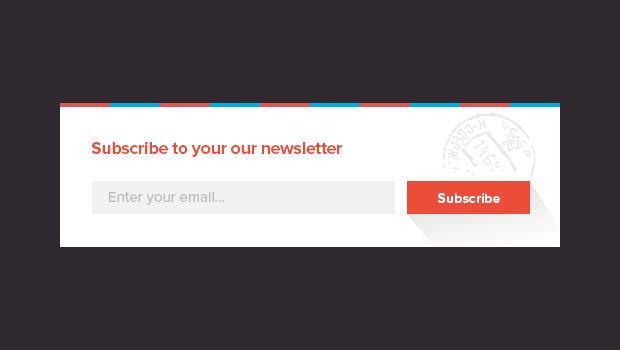
<style>
.page{position:relative;width:620px;height:350px;background:#2f292f}
.page>*{position:absolute;margin:0}
.t1{font:18px "ProximaNova-Bold";letter-spacing:-0.025em;color:#ea4e39}
.t2{font:15px "ProximaNova-Regular";color:#bababa}
.t3{font:14px "ProximaNova-Bold";color:#ffffff}
</style>
<div class="page">
<p class="t1" style="left:91px;top:142px;width:251px;height:15px">Subscribe to your our newsletter</p>
<p class="t2" style="left:109px;top:192px;width:115px;height:13px">Enter your email...</p>
<p class="t3" style="left:437px;top:193px;width:63px;height:10px">Subscribe</p>
</div>
